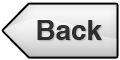
<style>
.page{position:relative;width:120px;height:60px}
.page>*{position:absolute;margin:0}
.t1{font:27.9px "Helvetica-Bold";color:#2f2f2f}
</style>
<div class="page">
<p class="t1" style="left:37px;top:20px;width:65px;height:20px">Back</p>
</div>
